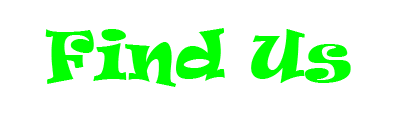
<style>
.page{position:relative;width:409px;height:115px;background:#ffffff}
.page>*{position:absolute;margin:0}
.t1{font:64px "Ravie";color:#00ff00}
</style>
<div class="page">
<p class="t1" style="left:45px;top:28px;width:306px;height:59px">Find Us</p>
</div>
